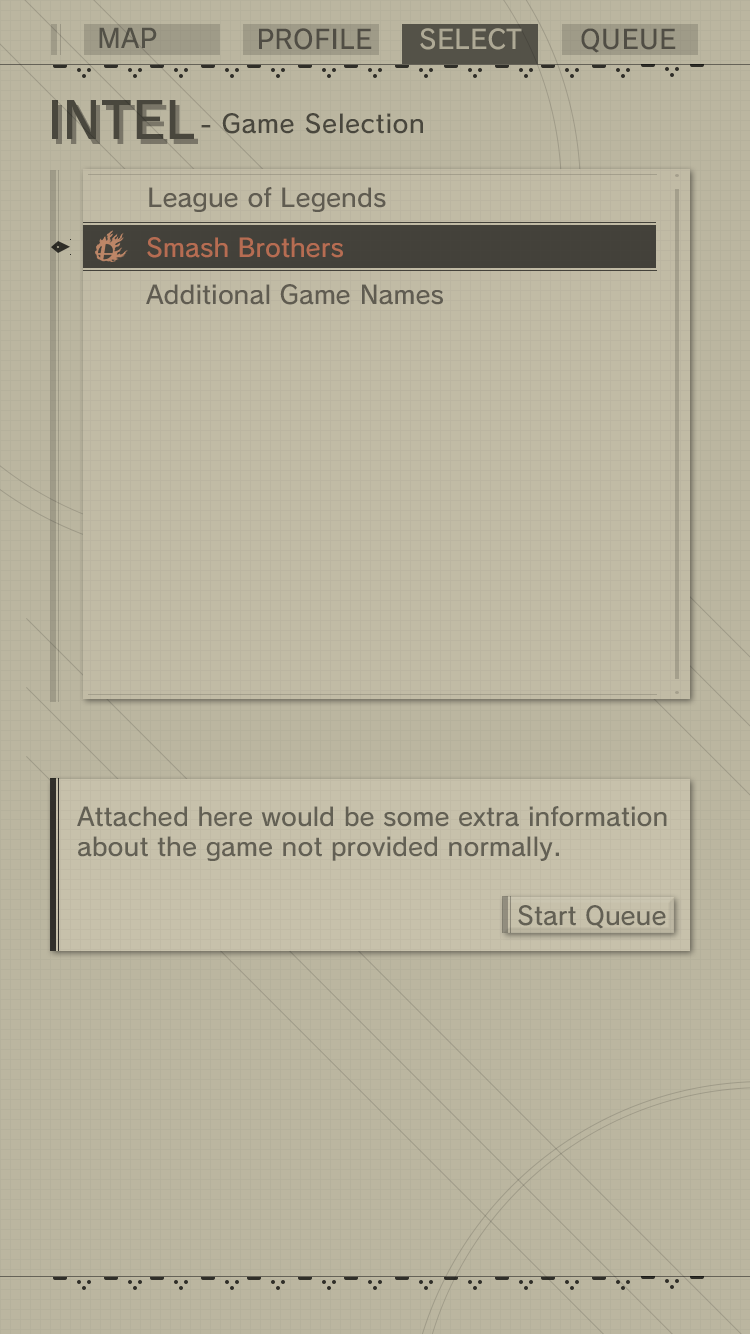
<style>
.page{position:relative;width:750px;height:1334px;background:#bbb6a0}
.page>*{position:absolute;margin:0}
.t1{font:26px "SCEPS3RodinLATIN-Regular";letter-spacing:0.01em;color:#535147}
.t2{font:26px "SCEPS3RodinLATIN-Regular";letter-spacing:0.01em;color:#504d44}
.t3{font:26px "SCEPS3RodinLATIN-Regular";color:#c7c1ab}
.t4{font:25.8px "SCEPS3RodinLATIN-Regular";letter-spacing:0.01em;color:#504d44}
.t5{font:50px "SCEPS3RodinLATIN-Regular";color:#49473d}
.t6{font:25px "SCEPS3RodinLATIN-Regular";letter-spacing:0.025em;color:#49473d}
.t7{font:25px "SCEPS3RodinLATIN-Regular";color:#605c51}
.t8{font:25px "SCEPS3RodinLATIN-Regular";color:#b76d52}
.t9{font:25px "SCEPS3RodinLATIN-Regular";color:#636054}
</style>
<div class="page">
<p class="t1" style="left:99px;top:27px;width:58px;height:21px">MAP</p>
<p class="t2" style="left:259px;top:28px;width:113px;height:22px">PROFILE</p>
<p class="t3" style="left:420px;top:28px;width:102px;height:22px">SELECT</p>
<p class="t4" style="left:581px;top:28px;width:95px;height:25px">QUEUE</p>
<p class="t5" style="left:52px;top:100px;width:142px;height:39px">INTEL</p>
<p class="t6" style="left:201px;top:113px;width:222px;height:21px">- Game Selection</p>
<p class="t7" style="left:149px;top:187px;width:237px;height:25px">League of Legends</p>
<p class="t8" style="left:147px;top:237px;width:196px;height:21px">Smash Brothers</p>
<p class="t7" style="left:146px;top:284px;width:297px;height:21px">Additional Game Names</p>
<p class="t9" style="left:77px;top:806px;width:590px;height:55px">Attached here would be some extra information <br>about the game not provided normally.</p>
<p class="t9" style="left:518px;top:905px;width:148px;height:24px">Start Queue</p>
</div>
